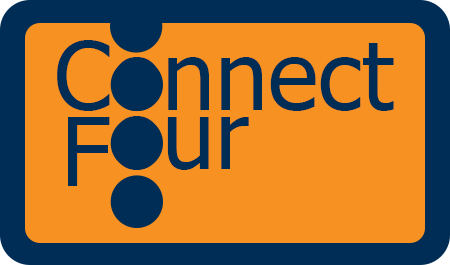
<style>
.page{position:relative;width:450px;height:265px;background:#f79121}
.page>*{position:absolute;margin:0}
.t1{font:95px "Tahoma";color:#002d56}
.t2{font:95px "Tahoma";color:#f79121}
</style>
<div class="page">
<p class="t1" style="left:57px;top:40px;width:337px;height:71px">Connect</p>
<p class="t1" style="left:70px;top:100px;width:179px;height:70px"><span class="t2">F</span>our</p>
<p class="t1" style="left:68px;top:117px;width:42px;height:69px">F</p>
</div>
